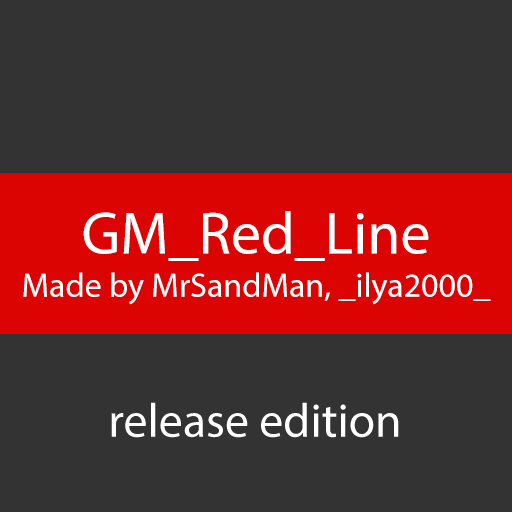
<style>
.page{position:relative;width:512px;height:512px;background:#333333}
.page>*{position:absolute;margin:0}
.t1{font:34px "MyriadPro-Regular";color:#ffffff}
.t2{font:60px "MyriadPro-Regular";color:#ffffff}
.t3{font:48px "Tahoma";color:#ffffff}
</style>
<div class="page">
<p class="t1" style="left:23px;top:211px;width:468px;height:94px;text-align:center"><span class="t2">GM_Red_Line<br></span>Made by MrSandMan, _ilya2000_</p>
<p class="t3" style="left:111px;top:402px;width:288px;height:36px">release edition</p>
</div>
